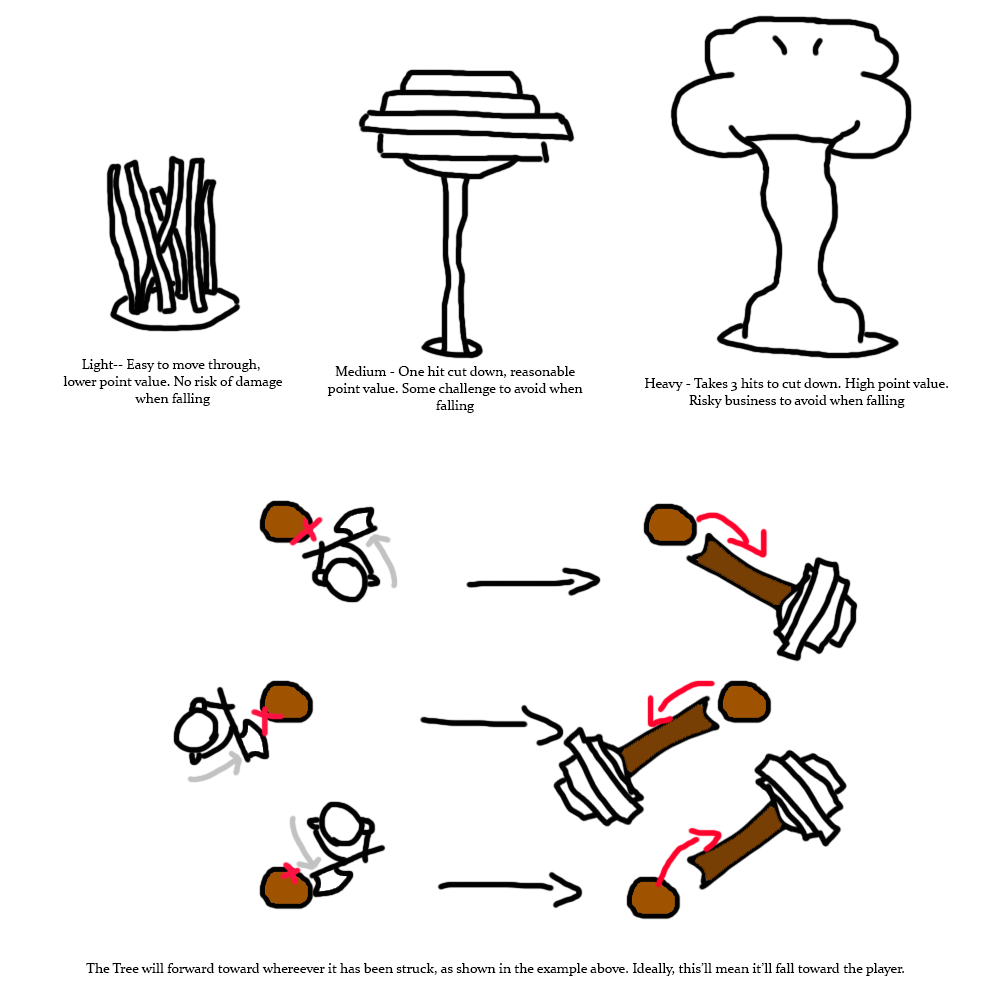
<style>
.page{position:relative;width:1000px;height:1000px;background:#ffffff}
.page>*{position:absolute;margin:0}
.t1{font:14px "Constantia";color:#020202}
</style>
<div class="page">
<p class="t1" style="left:63px;top:359px;width:220px;height:47px;text-align:center">Light-- Easy to move through, <br>lower point value. No risk of damage<br>when falling</p>
<p class="t1" style="left:327px;top:366px;width:256px;height:47px;text-align:center">Medium - One hit cut down, reasonable<br>point value. Some challenge to avoid when<br>falling</p>
<p class="t1" style="left:645px;top:378px;width:303px;height:30px;text-align:center">Heavy - Takes 3 hits to cut down. High point value.<br>Risky business to avoid when falling</p>
<p class="t1" style="left:86px;top:963px;width:818px;height:13px">The Tree will forward toward whereever it has been struck, as shown in the example above. Ideally, this’ll mean it’ll fall toward the player.</p>
</div>
